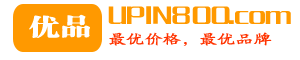
<style>
.page{position:relative;width:300px;height:60px;background:#ffffff}
.page>*{position:absolute;margin:0}
.t1{font:26.8px "FZCQJW--GB1-0";color:#ff9900}
.t2{font:24px "FZCSJW--GB1-0";color:#ffffff;scale:1.3 1}
.t3{font:14px "FZBWKSJW--GB1-0";color:#ff3300;scale:1.3 1}
</style>
<div class="page">
<p class="t1" style="left:108px;top:6px;width:183px;height:18px">UPIN800.com</p>
<p class="t2" style="left:29px;top:14px;width:61px;height:24px">优品</p>
<p class="t3" style="left:109px;top:32px;width:163px;height:14px">最优价格，最优品牌</p>
</div>
